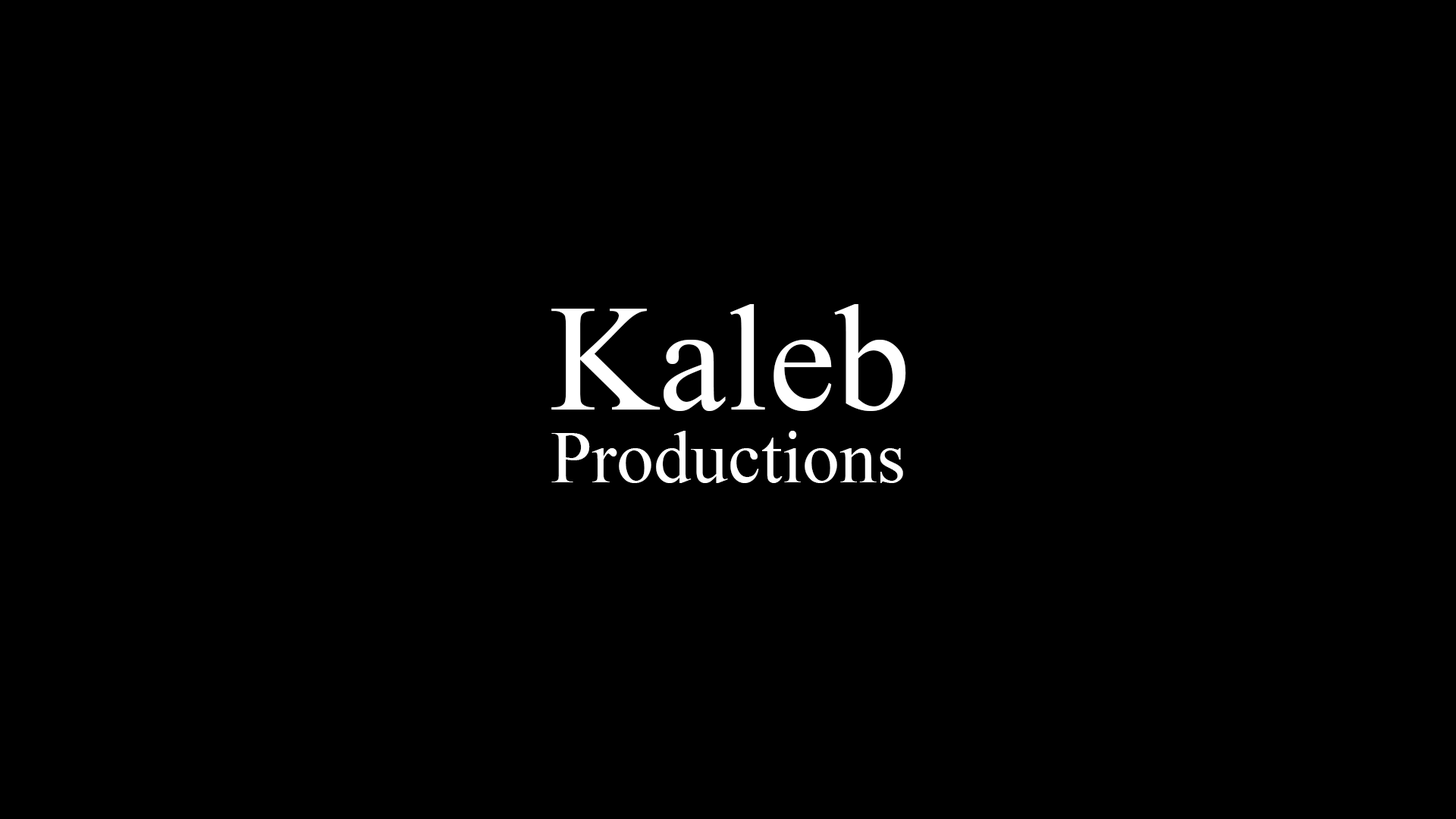
<style>
.page{position:relative;width:1456px;height:819px;background:#000000}
.page>*{position:absolute;margin:0}
.t1{font:151.7px "TimesNewRomanPSMT";color:#ffffff}
.t2{font:74.3px "TimesNewRomanPSMT";color:#ffffff}
</style>
<div class="page">
<p class="t1" style="left:551px;top:304px;width:355px;height:107px">Kaleb</p>
<p class="t2" style="left:551px;top:431px;width:352px;height:52px">Productions</p>
</div>
